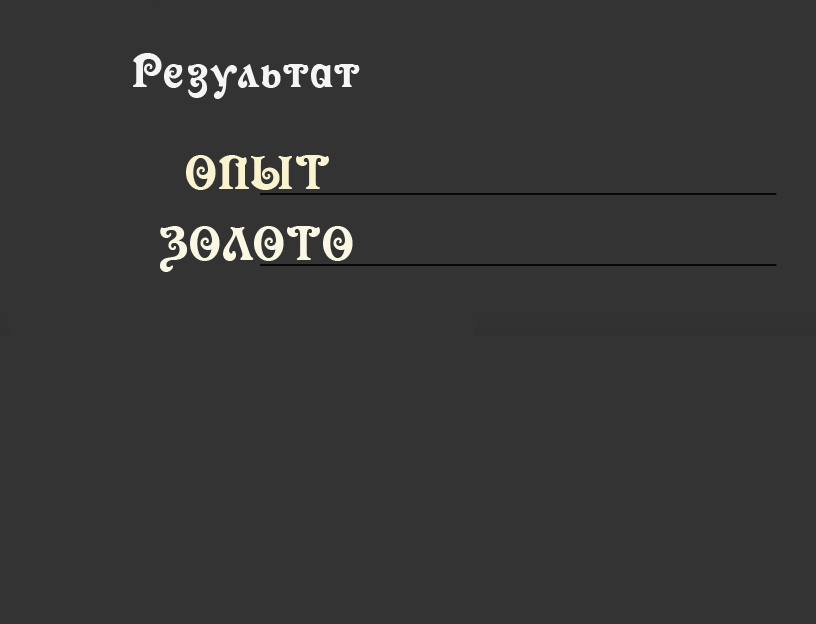
<style>
.page{position:relative;width:816px;height:624px;background:#333333}
.page>*{position:absolute;margin:0}
.t1{font:50px "NK123";color:#f9f3d0;text-transform:uppercase}
.t2{font:50px "NK123";color:#faf7e5;text-transform:uppercase}
</style>
<div class="page">
<p class="t1" style="left:186px;top:155px;width:143px;height:35px">Опыт</p>
<p class="t2" style="left:160px;top:226px;width:193px;height:46px">Золото</p>
</div>
